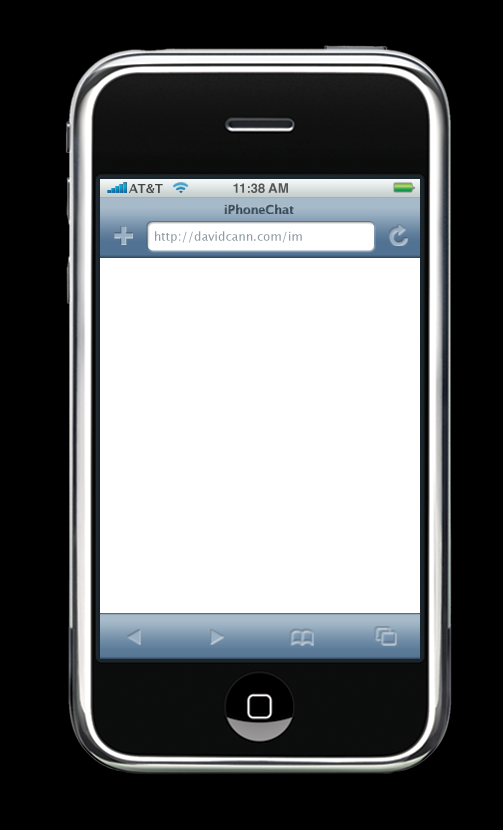
<style>
.page{position:relative;width:503px;height:830px;background:#000000}
.page>*{position:absolute;margin:0}
.t1{font:12px "LucidaGrande-Bold";color:#484848}
.t2{font:13px "Helvetica-Bold";color:#555655}
.t3{font:12px "LucidaGrande-Bold";color:#3b5262}
.t4{font:12px "LucidaGrande";color:#909da6}
</style>
<div class="page">
<p class="t1" style="left:129px;top:184px;width:34px;height:9px">AT&amp;T</p>
<p class="t2" style="left:233px;top:183px;width:55px;height:10px">11:38 AM</p>
<p class="t3" style="left:224px;top:204px;width:70px;height:10px">iPhoneChat</p>
<p class="t4" style="left:155px;top:231px;width:147px;height:12px">http://davidcann.com/im</p>
</div>
